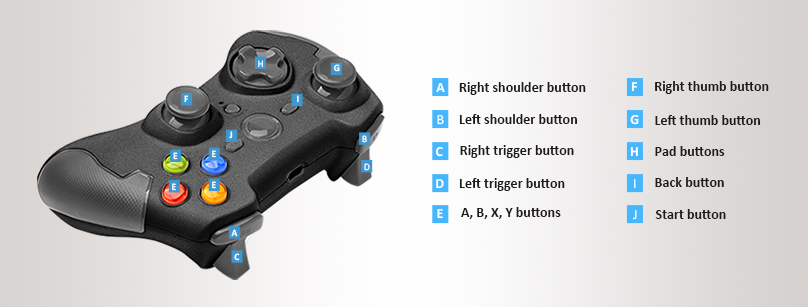
<style>
.page{position:relative;width:808px;height:307px}
.page>*{position:absolute;margin:0}
.t1{font:9.7px "Calibri";color:#ffffff}
.t2{font:9.7px "Calibri-Bold";color:#ffffff}
.t3{font:14px "Calibri-Bold";color:#fdfdfc}
.t4{font:14px "Calibri-Bold";color:#1d1c1a}
.t5{font:14px "Calibri-Bold";color:#ffffff}
.t6{font:14px "Calibri";color:#ffffff}
.t7{font:9.7px "Calibri-Bold";color:#fdfdfc}
.t8{font:14px "Calibri-Bold";color:#fcfbfa}
</style>
<div class="page">
<p class="t1" style="left:258px;top:60px;width:5px;height:8px">H</p>
<p class="t2" style="left:333px;top:64px;width:7px;height:8px">G</p>
<p class="t3" style="left:436px;top:82px;width:9px;height:11px">A</p>
<p class="t4" style="left:459px;top:82px;width:127px;height:13px">Right shoulder button</p>
<p class="t5" style="left:631px;top:82px;width:6px;height:10px">F</p>
<p class="t4" style="left:655px;top:81px;width:114px;height:13px">Right thumb button</p>
<p class="t2" style="left:184px;top:95px;width:5px;height:8px">F</p>
<p class="t2" style="left:297px;top:95px;width:2px;height:8px">I</p>
<p class="t6" style="left:437px;top:115px;width:7px;height:10px">B</p>
<p class="t4" style="left:459px;top:114px;width:119px;height:10px">Left shoulder button</p>
<p class="t5" style="left:630px;top:114px;width:9px;height:11px">G</p>
<p class="t4" style="left:655px;top:115px;width:106px;height:10px">Left thumb button</p>
<p class="t2" style="left:229px;top:131px;width:4px;height:8px">J</p>
<p class="t1" style="left:362px;top:135px;width:5px;height:8px">B</p>
<p class="t7" style="left:212px;top:150px;width:4px;height:8px">E</p>
<p class="t5" style="left:435px;top:146px;width:8px;height:11px">C</p>
<p class="t4" style="left:460px;top:145px;width:114px;height:13px">Right trigger button</p>
<p class="t3" style="left:630px;top:147px;width:8px;height:10px">H</p>
<p class="t4" style="left:655px;top:146px;width:70px;height:10px">Pad buttons</p>
<p class="t7" style="left:173px;top:152px;width:5px;height:8px">E</p>
<p class="t1" style="left:364px;top:163px;width:6px;height:8px">D</p>
<p class="t7" style="left:172px;top:183px;width:4px;height:8px">E</p>
<p class="t7" style="left:212px;top:181px;width:4px;height:8px">E</p>
<p class="t8" style="left:436px;top:179px;width:8px;height:10px">D</p>
<p class="t4" style="left:459px;top:178px;width:106px;height:13px">Left trigger button</p>
<p class="t6" style="left:634px;top:178px;width:2px;height:11px">I</p>
<p class="t4" style="left:655px;top:177px;width:69px;height:10px">Back button</p>
<p class="t5" style="left:437px;top:209px;width:6px;height:10px">E</p>
<p class="t4" style="left:461px;top:207px;width:100px;height:12px">A, B, X, Y buttons</p>
<p class="t6" style="left:632px;top:209px;width:5px;height:11px">J</p>
<p class="t4" style="left:655px;top:209px;width:71px;height:10px">Start button</p>
<p class="t7" style="left:231px;top:229px;width:7px;height:8px">A</p>
<p class="t7" style="left:234px;top:253px;width:6px;height:8px">C</p>
</div>
